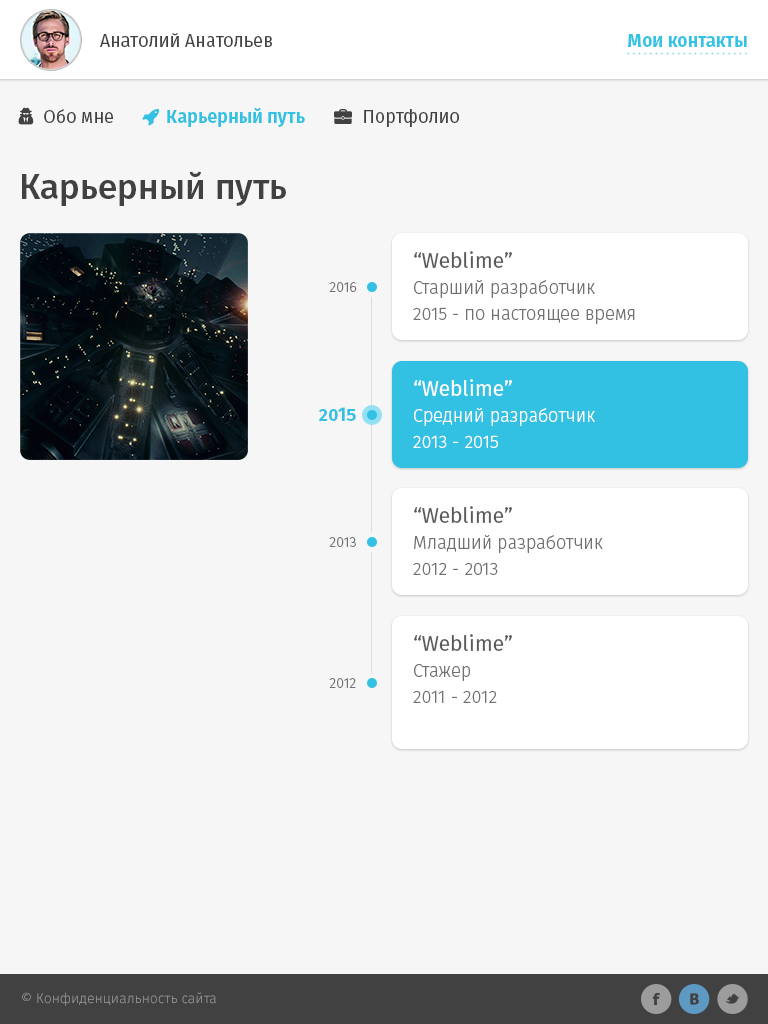
<style>
.page{position:relative;width:768px;height:1024px;background:#f6f6f6}
.page>*{position:absolute;margin:0}
.t1{font:18px "FiraSans-Regular";color:#414141}
.t2{font:18px "FiraSans-Bold";color:#32c3e5}
.t3{font:35px "FiraSans-Medium";color:#414141}
.t4{font:18px/26px "FiraSans-Light";color:#727272}
.t5{font:21px/26px "FiraSans-Regular";color:#5a5a5a}
.t6{font:14px "FiraSans-Light";color:#727272}
.t7{font:18px/26px "FiraSans-Light";color:#ffffff}
.t8{font:21px/26px "FiraSans-Regular";color:#ffffff}
.t9{font:18px "FiraSans-Bold";color:#33c1e3}
.t10{font:14px "FiraSans-Light";color:#9c9c9c}
</style>
<div class="page">
<p class="t1" style="left:100px;top:33px;width:172px;height:14px">Анатолий Анатольев</p>
<p class="t2" style="left:628px;top:34px;width:119px;height:13px">Мои контакты</p>
<p class="t1" style="left:364px;top:109px;width:95px;height:18px">Портфолио</p>
<p class="t3" style="left:22px;top:171px;width:264px;height:35px">Карьерный путь</p>
<p class="t4" style="left:413px;top:251px;width:222px;height:73px"><span class="t5">“Weblime”<br></span>Старший разработчик<br>2015 - по настоящее время</p>
<p class="t6" style="left:329px;top:282px;width:28px;height:10px">2016</p>
<p class="t7" style="left:413px;top:379px;width:182px;height:69px"><span class="t8">“Weblime”<br></span>Средний разработчик<br>2013 - 2015</p>
<p class="t9" style="left:318px;top:407px;width:38px;height:14px">2015</p>
<p class="t4" style="left:413px;top:506px;width:190px;height:69px"><span class="t5">“Weblime”<br></span>Младший разработчик<br>2012 - 2013</p>
<p class="t6" style="left:329px;top:537px;width:27px;height:10px">2013</p>
<p class="t4" style="left:413px;top:634px;width:99px;height:69px"><span class="t5">“Weblime”<br></span>Стажер<br>2011 - 2012</p>
<p class="t6" style="left:329px;top:678px;width:27px;height:10px">2012</p>
<p class="t10" style="left:22px;top:992px;width:194px;height:14px">© Конфиденциальность сайта</p>
</div>
